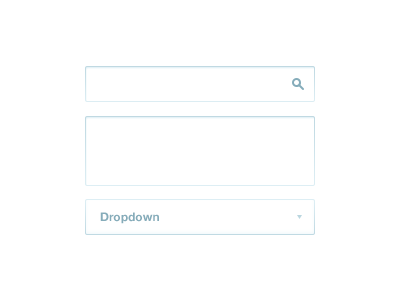
<style>
.page{position:relative;width:400px;height:300px;background:#ffffff}
.page>*{position:absolute;margin:0}
.t1{font:12px "HelveticaNeue-Bold";color:#85acba}
</style>
<div class="page">
<p class="t1" style="left:100px;top:212px;width:59px;height:12px">Dropdown</p>
</div>
